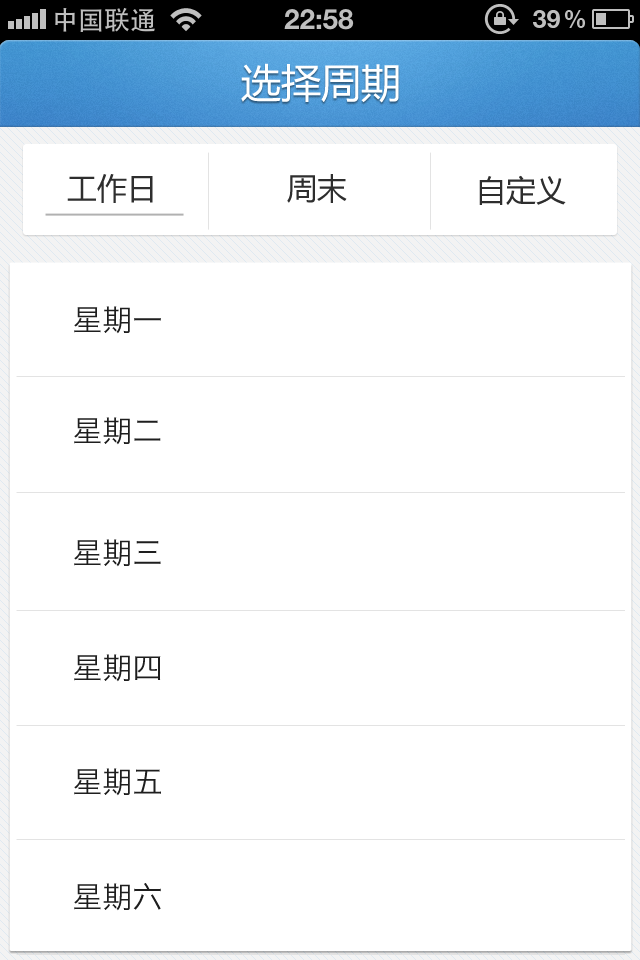
<style>
.page{position:relative;width:640px;height:960px;background:#ffffff}
.page>*{position:absolute;margin:0}
.t1{font:40px "MicrosoftYaHei";color:#ffffff}
.t2{font:30px "MicrosoftYaHei";color:#2e2e2e}
.t3{font:30px "HiraginoSansGB-W3";color:#1e1e1e}
</style>
<div class="page">
<p class="t1" style="left:241px;top:63px;width:158px;height:40px">选择周期</p>
<p class="t2" style="left:67px;top:174px;width:86px;height:29px">工作日</p>
<p class="t2" style="left:287px;top:174px;width:60px;height:29px">周末</p>
<p class="t2" style="left:479px;top:175px;width:87px;height:30px">自定义</p>
<p class="t3" style="left:74px;top:306px;width:87px;height:28px">星期一</p>
<p class="t3" style="left:74px;top:417px;width:87px;height:28px">星期二</p>
<p class="t3" style="left:74px;top:539px;width:87px;height:28px">星期三</p>
<p class="t3" style="left:74px;top:654px;width:87px;height:28px">星期四</p>
<p class="t3" style="left:74px;top:768px;width:87px;height:28px">星期五</p>
<p class="t3" style="left:74px;top:883px;width:87px;height:28px">星期六</p>
</div>
